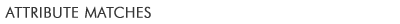
<style>
.page{position:relative;width:400px;height:24px;background:#ffffff}
.page>*{position:absolute;margin:0}
.t1{font:14.7px "FuturaBT-Light";letter-spacing:0.025em;color:#363636;text-transform:uppercase;font-weight:bold}
</style>
<div class="page">
<p class="t1" style="left:5px;top:6px;width:146px;height:12px">attribute MATCHES</p>
</div>
